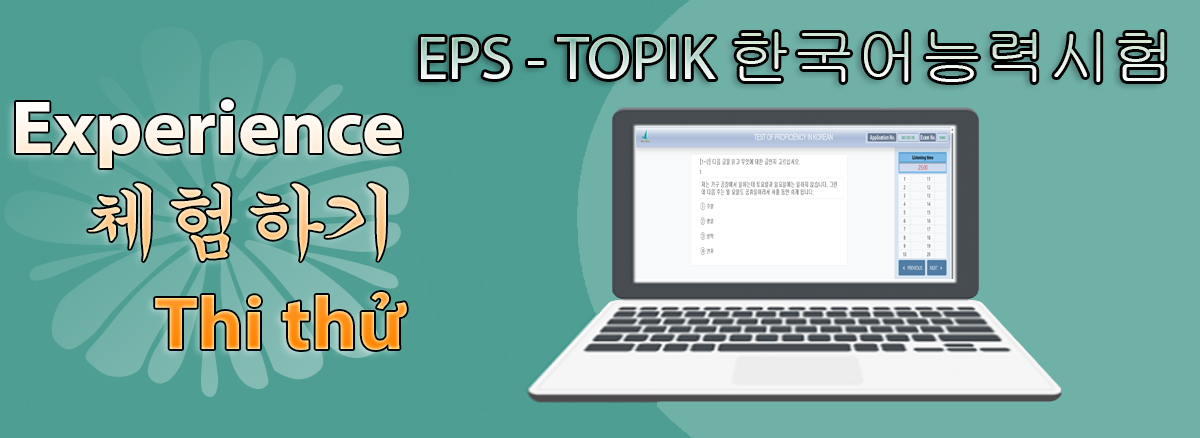
<style>
.page{position:relative;width:1200px;height:438px;background:#6fb0a7}
.page>*{position:absolute;margin:0}
.t1{font:60.8px "MyriadPro-Regular";scale:1.05 1}
.t2{font:60.8px "Gulim";scale:1.05 1}
.t3{font:76px/111px "MyriadPro-Bold";scale:1.05 1}
.t4{font:76px/111px "MyriadPro-Regular";scale:1.05 1}
.t5{font:80.7px/111px "Gungsuh";letter-spacing:-0.08em;text-transform:uppercase;scale:1.05 1}
</style>
<div class="page">
<p class="t1" style="left:421px;top:32px;width:744px;height:50px">EPS - TOPIK <span class="t2">한국어능력시험</span></p>
<p class="t3" style="left:16px;top:99px;width:391px;height:251px;text-align:right"><span class="t4"> </span>Experience<br><span class="t5">체험하기 <br></span>Thi thử</p>
</div>
